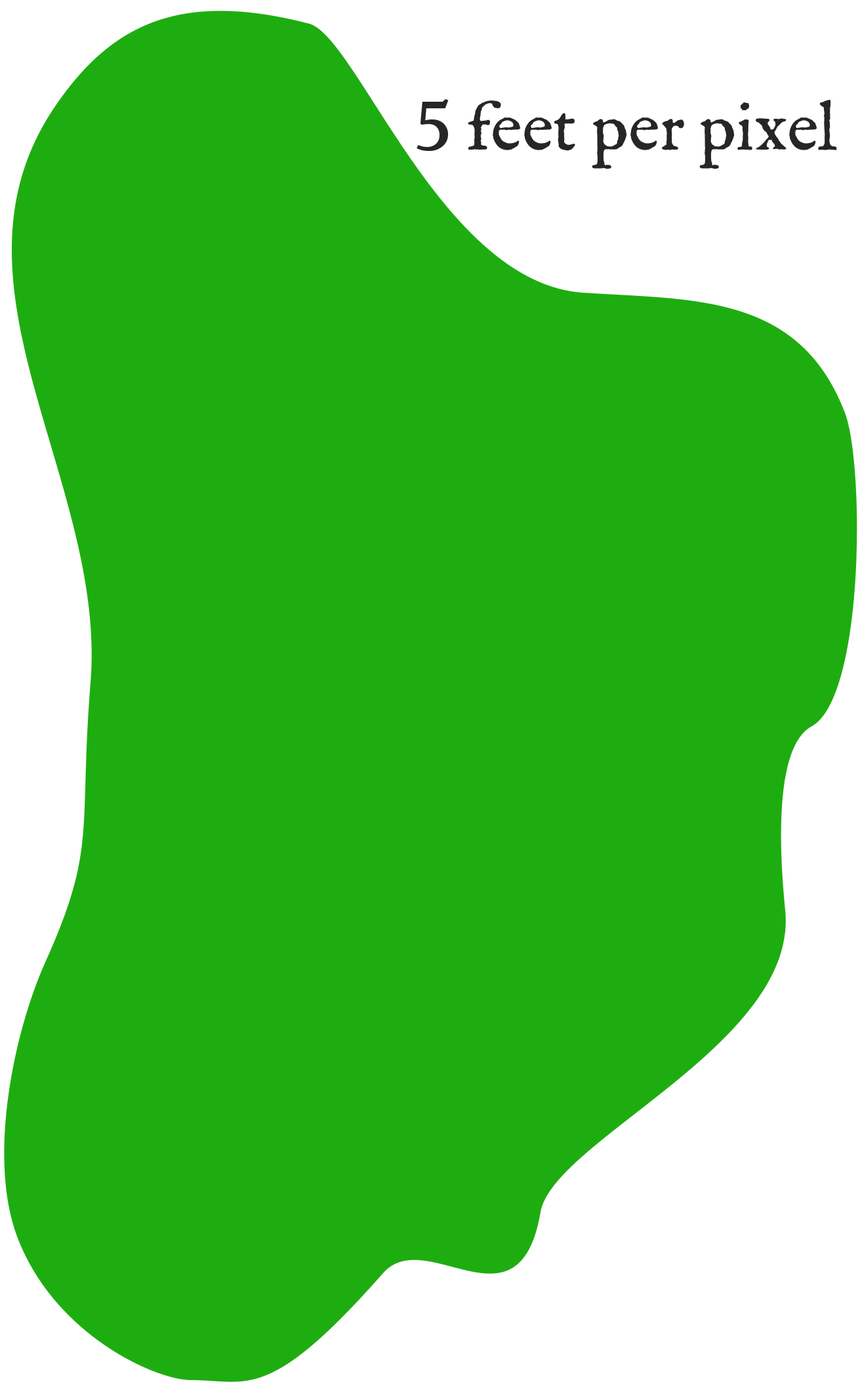
<style>
.page{position:relative;width:860px;height:1386px;background:#1ead10}
.page>*{position:absolute;margin:0}
.t1{font:68.3px "IM_FELL_English_Roman";color:#262626}
.t2{font:68.3px "Volkhov-Regular";color:#262626}
</style>
<div class="page">
<p class="t1" style="left:417px;top:99px;width:420px;height:70px"><span class="t2">5</span> feet per pixel</p>
</div>
